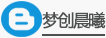
<style>
.page{position:relative;width:106px;height:38px;background:#f8f8f8}
.page>*{position:absolute;margin:0}
.t1{font:16.7px "MicrosoftYaHei";letter-spacing:-0.1em;color:#4c504e;font-weight:bold}
</style>
<div class="page">
<p class="t1" style="left:42px;top:12px;width:64px;height:17px">梦创晨曦</p>
</div>
